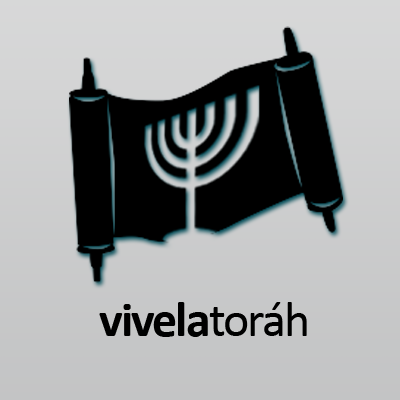
<style>
.page{position:relative;width:400px;height:400px}
.page>*{position:absolute;margin:0}
.t1{font:50.2px "Calibri-Bold";letter-spacing:-0.04em;color:#000000}
.t2{font:50.2px "Calibri";letter-spacing:-0.04em;color:#000000}
</style>
<div class="page">
<p class="t1" style="left:99px;top:302px;width:208px;height:35px">vivela<span class="t2">toráh</span></p>
</div>
